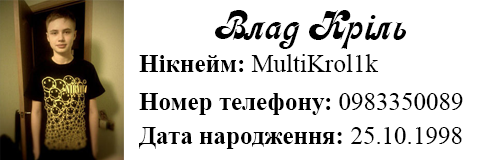
<style>
.page{position:relative;width:480px;height:160px;background:#ffffff}
.page>*{position:absolute;margin:0}
.t1{font:41.7px "Asessor";color:#000000}
.t2{font:25px "TimesNewRomanPSMT";color:#000000}
.t3{font:25px "TimesNewRomanPS-BoldMT";color:#000000}
</style>
<div class="page">
<p class="t1" style="left:215px;top:10px;width:191px;height:39px">Влад Кріль</p>
<p class="t2" style="left:139px;top:54px;width:240px;height:18px"><span class="t3">Нікнейм: </span>MultiKrol1k</p>
<p class="t3" style="left:139px;top:93px;width:324px;height:22px">Номер телефону: <span class="t2">0983350089</span></p>
<p class="t3" style="left:139px;top:127px;width:323px;height:22px">Дата народження: <span class="t2">25.10.1998</span></p>
</div>
